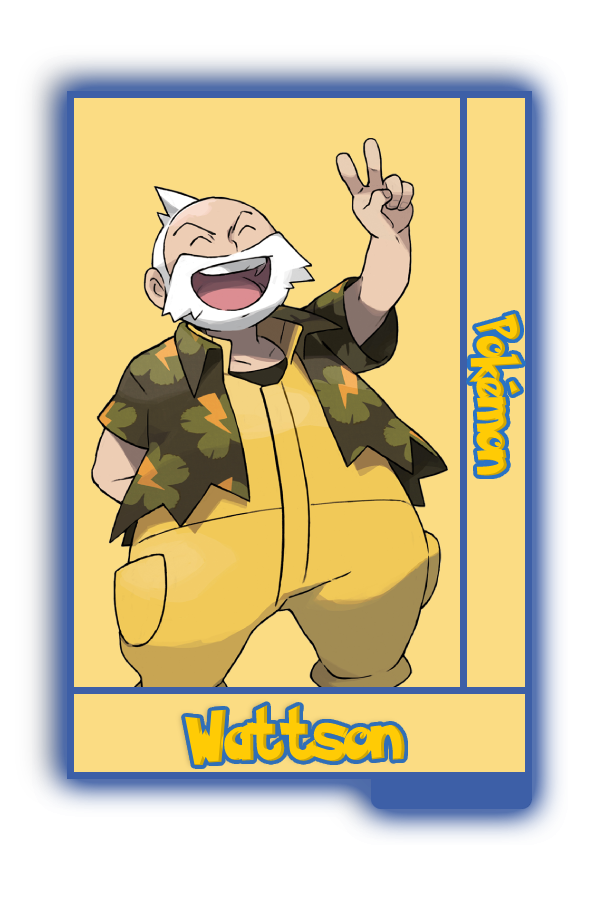
<style>
.page{position:relative;width:600px;height:900px;background:#fbdc83}
.page>*{position:absolute;margin:0}
.t1{font:48.8px "PokemonSolidNormal";color:#ffcb05;scale:0.8 1}
.t2{font:56.6px "PokemonSolidNormal";color:#ffcb05;scale:0.92 1}
</style>
<div class="page">
<p class="t1" style="left:469px;top:313px;width:54px;height:163px;rotate:90deg">Pokémon</p>
<p class="t2" style="left:185px;top:705px;width:220px;height:61px">Wattson</p>
</div>
